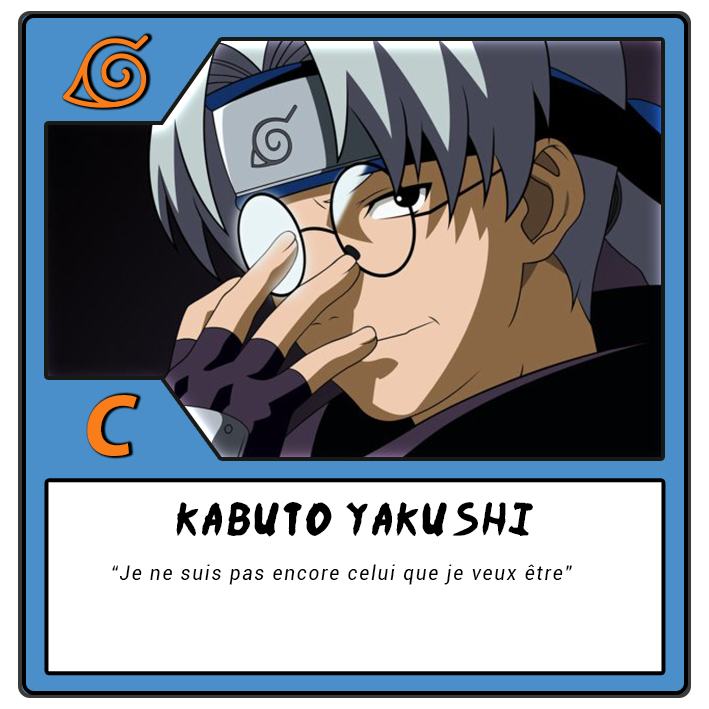
<style>
.page{position:relative;width:709px;height:709px;background:#ffffff}
.page>*{position:absolute;margin:0}
.t1{font:87.5px "MyriadPro-BoldIt";letter-spacing:-0.12em;color:#f97d18}
.t2{font:37.5px "Ninja-Naruto";letter-spacing:0.1em;color:#000000}
.t3{font:20.8px "Roboto-Italic";letter-spacing:0.1em;color:#000000;scale:0.9 1}
</style>
<div class="page">
<p class="t1" style="left:87px;top:395px;width:50px;height:61px">C</p>
<p class="t2" style="left:176px;top:502px;width:357px;height:35px">Kabuto Yakushi</p>
<p class="t3" style="left:112px;top:564px;width:460px;height:21px">“Je ne suis pas encore celui que je veux être”</p>
</div>
